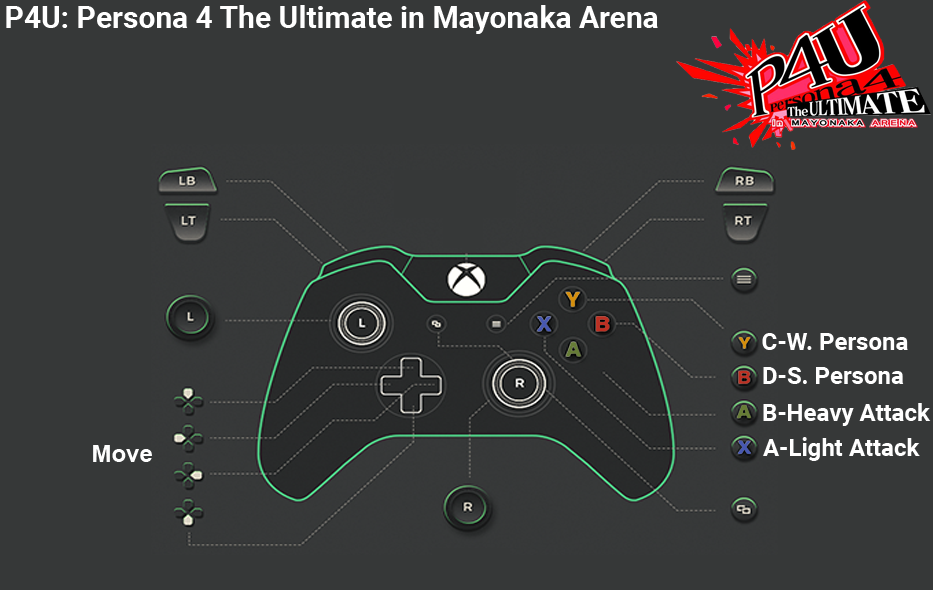
<style>
.page{position:relative;width:933px;height:590px;background:#363838}
.page>*{position:absolute;margin:0}
.t1{font:30px "Roboto-Bold";color:#ffffff}
.t2{font:24px "Roboto-Bold";color:#ffffff}
.t3{font:24px "Arial-BoldMT";color:#fefefe}
</style>
<div class="page">
<p class="t1" style="left:6px;top:5px;width:652px;height:29px">P4U: Persona 4 The Ultimate in Mayonaka Arena</p>
<p class="t2" style="left:762px;top:333px;width:146px;height:17px">C-W. Persona</p>
<p class="t2" style="left:763px;top:367px;width:141px;height:17px">D-S. Persona</p>
<p class="t2" style="left:763px;top:403px;width:168px;height:23px">B-Heavy Attack</p>
<p class="t2" style="left:763px;top:437px;width:157px;height:24px">A-Light Attack</p>
<p class="t3" style="left:93px;top:445px;width:59px;height:17px">Move</p>
</div>
